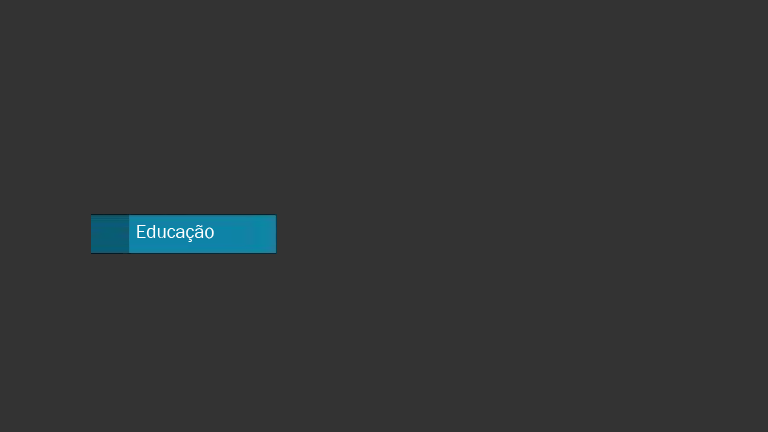
<style>
.page{position:relative;width:768px;height:432px;background:#333333}
.page>*{position:absolute;margin:0}
.t1{font:19px "FranklinGothic-Book";color:#ffffff}
</style>
<div class="page">
<p class="t1" style="left:137px;top:225px;width:77px;height:17px">Educação</p>
</div>
